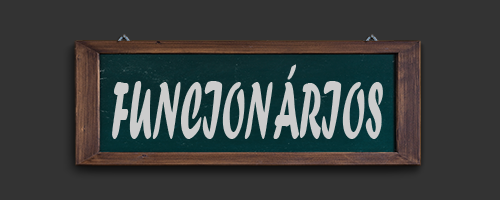
<style>
.page{position:relative;width:500px;height:200px;background:#333333}
.page>*{position:absolute;margin:0}
.t1{font:85.3px "ForteMT";color:#cccccc;scale:0.42 1}
.t2{font:85.3px "SnapITC-Regular";color:#00ff66;scale:0.42 1}
</style>
<div class="page">
<p class="t1" style="left:112px;top:64px;width:271px;height:75px"><span class="t2"> </span>FUNCIONÁRIOS</p>
</div>
